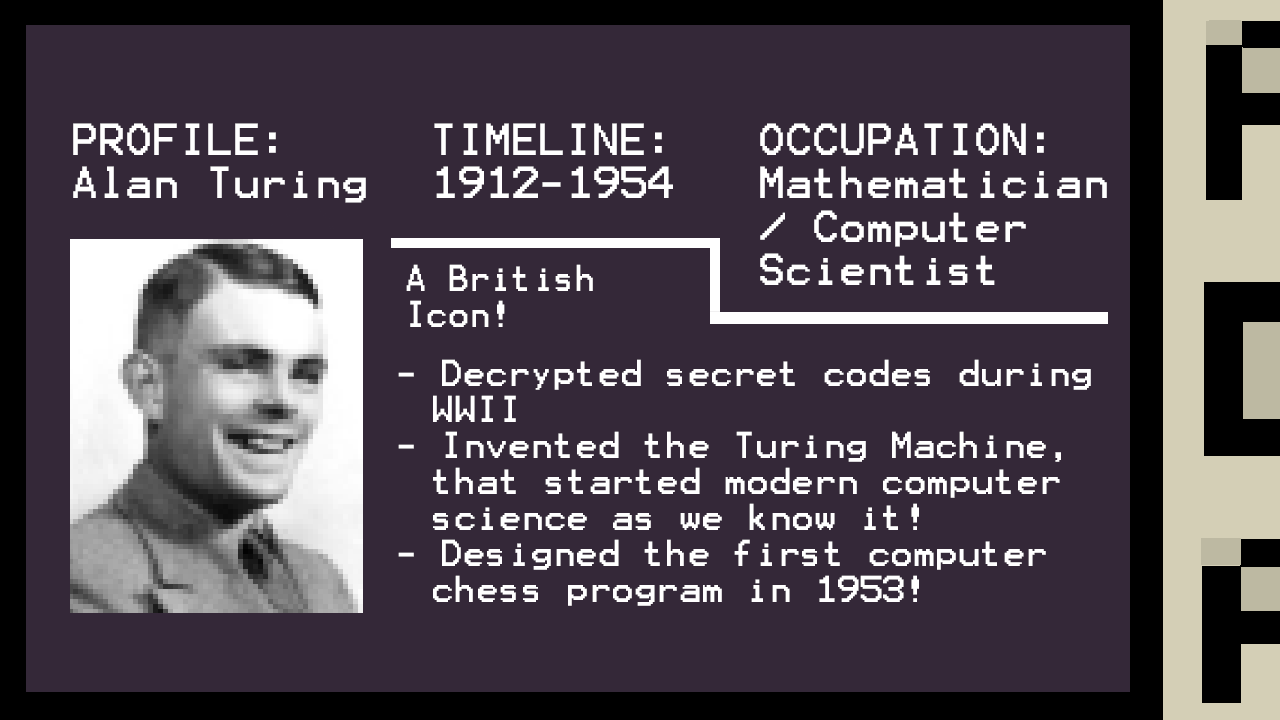
<style>
.page{position:relative;width:1280px;height:720px;background:#342838}
.page>*{position:absolute;margin:0}
.t1{font:36px "Terminal";color:#ffffff}
.t2{font:30px "Terminal";color:#ffffff;scale:0.94 1}
.t3{font:30px "Terminal";color:#ffffff}
</style>
<div class="page">
<p class="t1" style="left:73px;top:123px;width:293px;height:80px">PROFILE:<br>Alan Turing</p>
<p class="t1" style="left:434px;top:123px;width:239px;height:75px">TIMELINE:<br>1912-1954</p>
<p class="t1" style="left:760px;top:123px;width:347px;height:162px">OCCUPATION:<br>Mathematician<br>/ Computer<br>Scientist</p>
<p class="t2" style="left:406px;top:264px;width:187px;height:63px">A British Icon!</p>
<p class="t3" style="left:398px;top:359px;width:693px;height:247px">- Decrypted secret codes during<br> WWII<br>- Invented the Turing Machine,<br> that started modern computer<br> science as we know it!<br>- Designed the first computer<br> chess program in 1953!</p>
</div>
